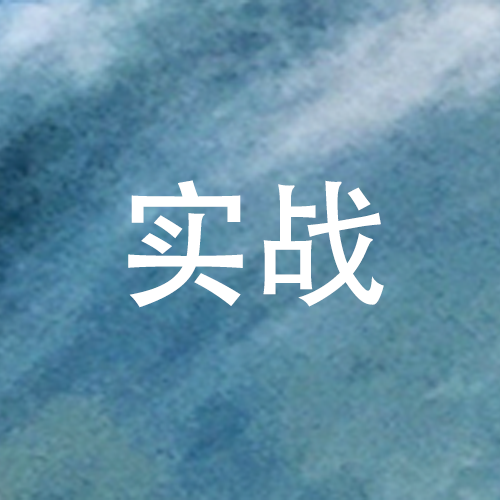
<style>
.page{position:relative;width:500px;height:500px}
.page>*{position:absolute;margin:0}
.t1{font:136px "AdobeHeitiStd-Regular";color:#ffffff}
</style>
<div class="page">
<p class="t1" style="left:128px;top:180px;width:256px;height:128px">实战</p>
</div>
